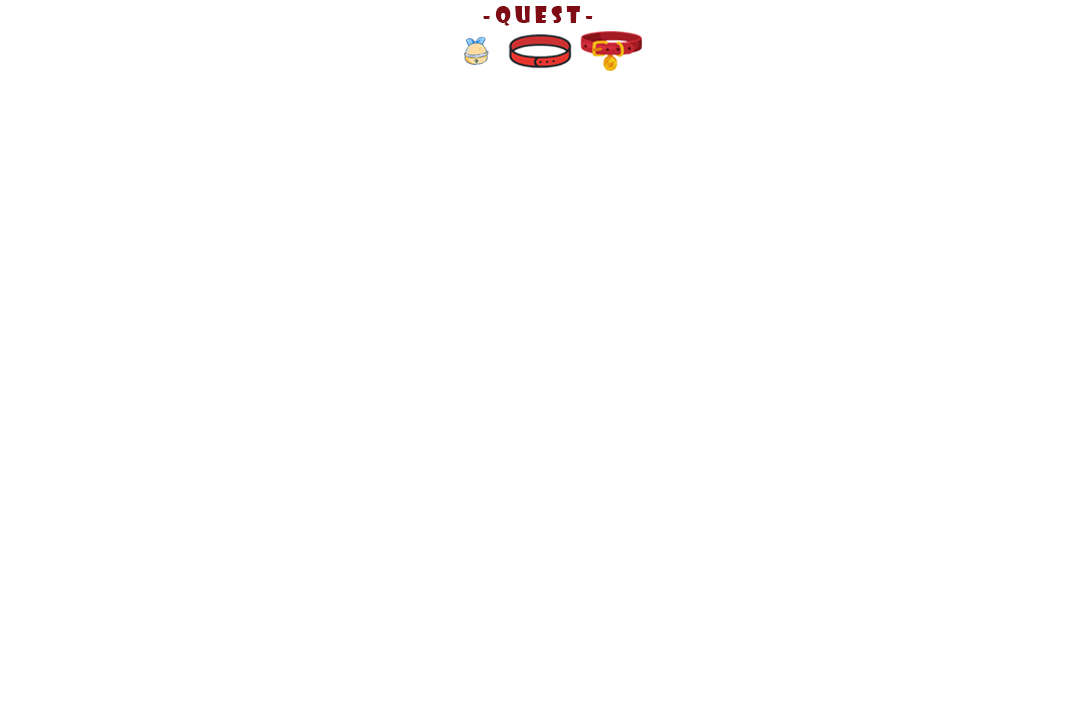
<style>
.page{position:relative;width:1080px;height:720px;background:#ffffff}
.page>*{position:absolute;margin:0}
.t1{font:37.5px "ShowcardGothic-Reg";letter-spacing:0.2em;color:#7f0c14}
</style>
<div class="page">
<p class="t1" style="left:483px;top:6px;width:110px;height:20px">-quest-</p>
</div>
